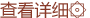
<style>
.page{position:relative;width:90px;height:18px;background:#ffffff}
.page>*{position:absolute;margin:0}
.t1{font:17px "MicrosoftYaHei";color:#883928}
.t2{font:17px "Tahoma"}
</style>
<div class="page">
<p class="t1" style="left:0px;top:1px;width:68px;height:18px">查看详细</p>
<p class="t2" style="left:68px;top:1px;width:19px;height:18px">۞</p>
</div>
